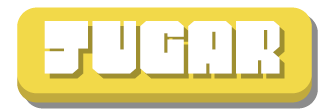
<style>
.page{position:relative;width:328px;height:110px;background:#ffffff}
.page>*{position:absolute;margin:0}
.t1{font:52px "Fruit-Punch";letter-spacing:0.02em;color:#ffffff;font-weight:bold;scale:1.16 1}
</style>
<div class="page">
<p class="t1" style="left:44px;top:21px;width:236px;height:53px">JUGAR</p>
</div>
